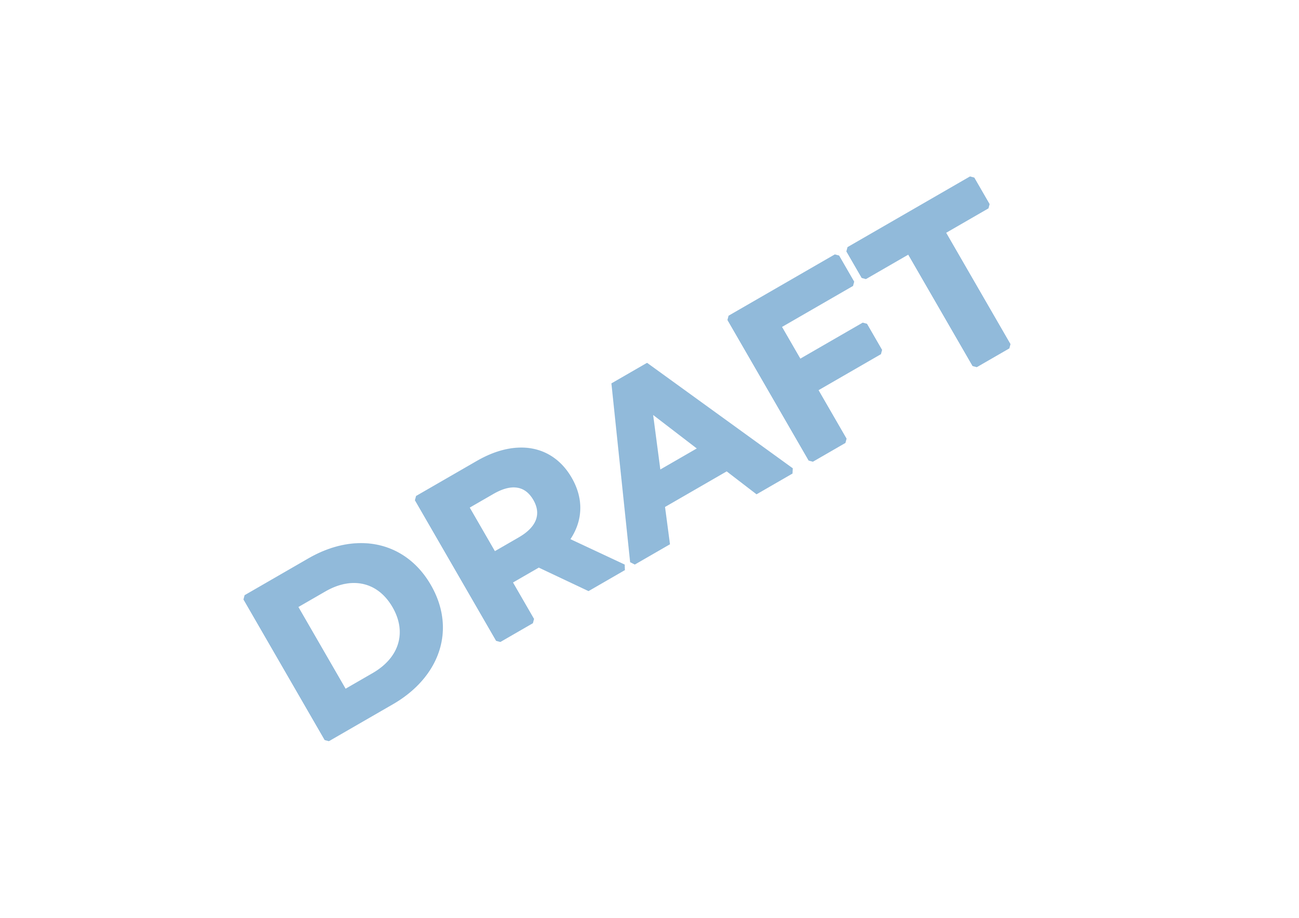
<style>
.page{position:relative;width:1299px;height:918px;background:#ffffff}
.page>*{position:absolute;margin:0}
.t1{font:231.9px "Montserrat-Bold";color:#91bada;font-weight:bold}
</style>
<div class="page">
<p class="t1" style="left:243px;top:176px;width:767px;height:566px;rotate:-30deg">DRAFT</p>
</div>
